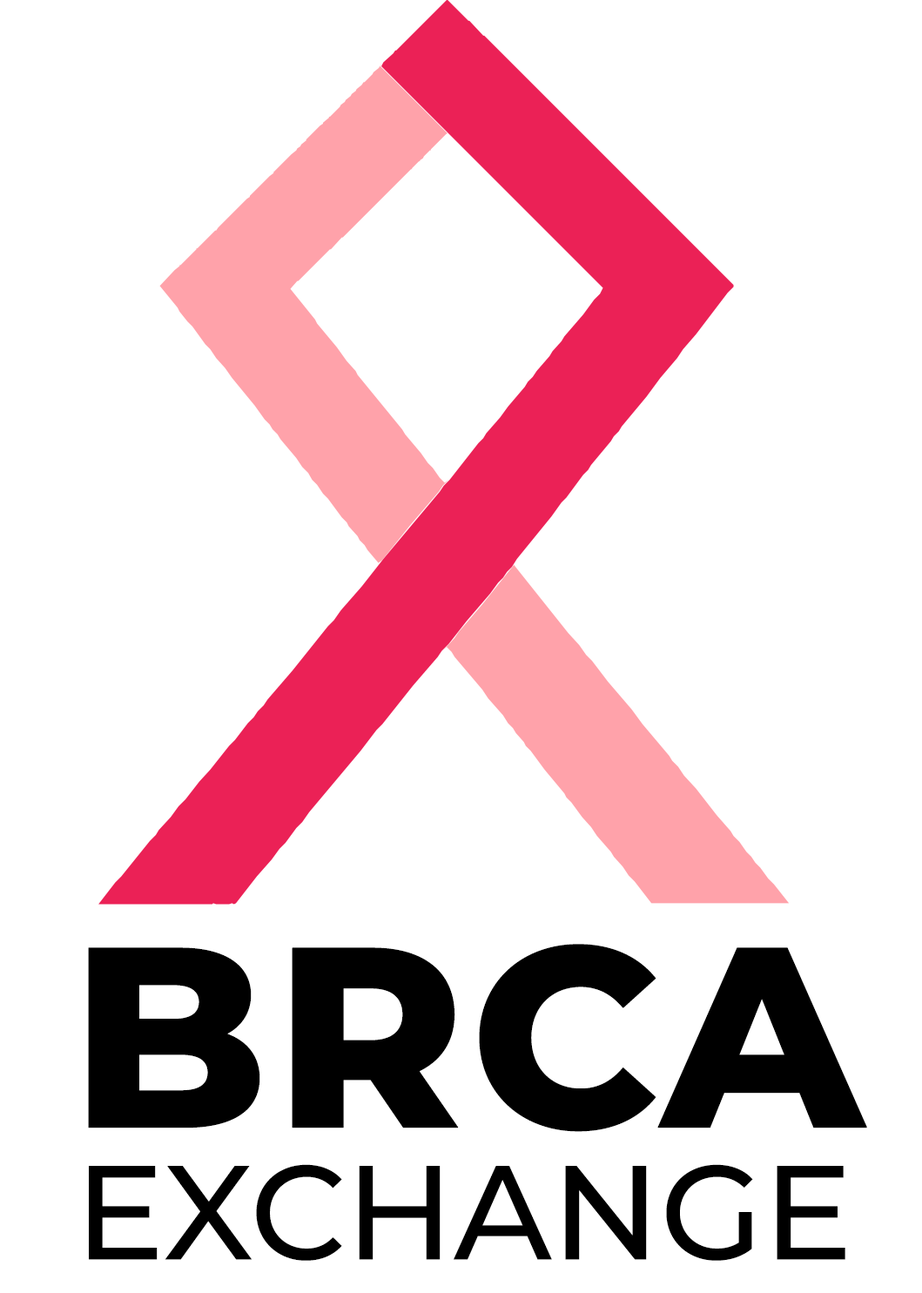
<style>
.page{position:relative;width:922px;height:1293px;background:#ffffff}
.page>*{position:absolute;margin:0}
.t1{font:256.1px "Montserrat-ExtraBold";color:#000000;font-weight:bold}
.t2{font:133.6px "Montserrat-Medium";color:#000000}
</style>
<div class="page">
<p class="t1" style="left:88px;top:944px;width:779px;height:188px">BRCA</p>
<p class="t2" style="left:89px;top:1164px;width:757px;height:97px">EXCHANGE</p>
</div>
